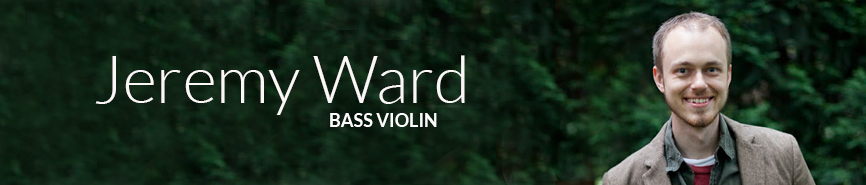
<style>
.page{position:relative;width:866px;height:185px}
.page>*{position:absolute;margin:0}
.t1{font:66.4px "Lato-Light";color:#fcf7f7}
.t2{font:18px "Lato-Bold";color:#fefefe}
</style>
<div class="page">
<p class="t1" style="left:95px;top:55px;width:370px;height:60px">Jeremy Ward</p>
<p class="t2" style="left:330px;top:113px;width:107px;height:14px">BASS VIOLIN</p>
</div>
